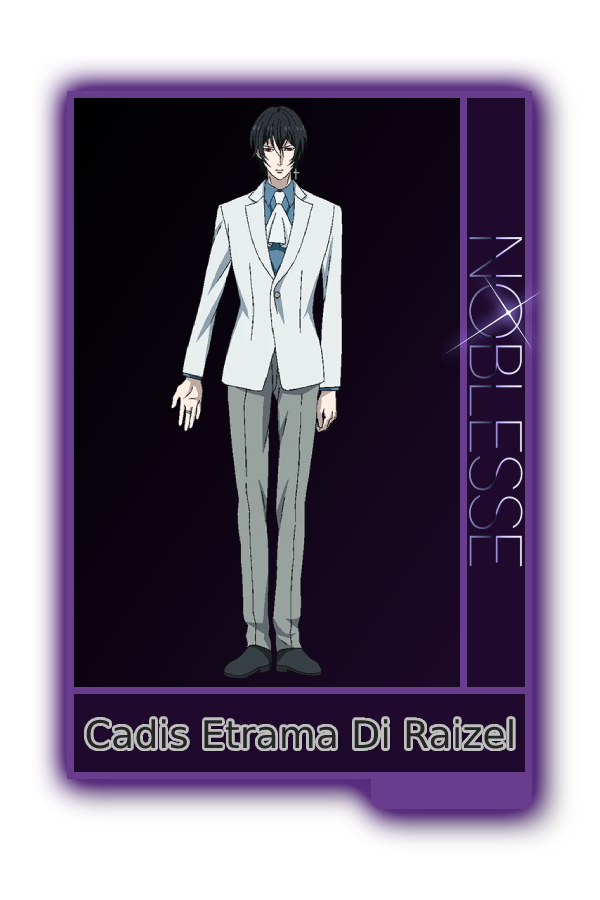
<style>
.page{position:relative;width:600px;height:900px;background:#ffffff}
.page>*{position:absolute;margin:0}
.t1{font:38px "CoolveticaRg-Regular";color:#252525}
</style>
<div class="page">
<p class="t1" style="left:86px;top:719px;width:427px;height:30px">Cadis Etrama Di Raizel</p>
</div>
